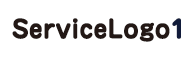
<style>
.page{position:relative;width:194px;height:60px;background:#ffffff}
.page>*{position:absolute;margin:0}
.t1{font:24px "Jun501Pro-Bold";color:#231815;font-weight:bold}
.t2{font:24px "Jun501Pro-Bold";color:#111b3a;font-weight:bold}
</style>
<div class="page">
<p class="t1" style="left:12px;top:18px;width:169px;height:24px">ServiceLogo<span class="t2">1</span></p>
</div>
